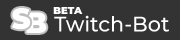
<style>
.page{position:relative;width:180px;height:40px;background:#333333}
.page>*{position:absolute;margin:0}
.t1{font:28.9px "Montserrat-Black";color:#ffffff}
.t2{font:10px "Montserrat-Black";color:#ffffff}
.t3{font:21.1px "Montserrat-Medium";color:#ffffff}
</style>
<div class="page">
<p class="t1" style="left:12px;top:8px;width:19px;height:22px">S</p>
<p class="t1" style="left:26px;top:12px;width:21px;height:21px">B</p>
<p class="t2" style="left:53px;top:7px;width:30px;height:7px">BETA</p>
<p class="t3" style="left:54px;top:15px;width:115px;height:17px">Twitch-Bot</p>
</div>
